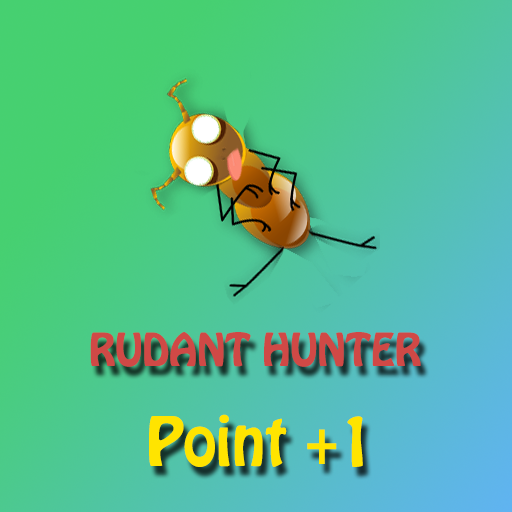
<style>
.page{position:relative;width:512px;height:512px}
.page>*{position:absolute;margin:0}
.t1{font:40px "HoboStd";color:#d04946}
.t2{font:60px "HoboStd";color:#ffe400}
</style>
<div class="page">
<p class="t1" style="left:90px;top:332px;width:331px;height:35px">RUDANT HUNTER</p>
<p class="t2" style="left:149px;top:414px;width:214px;height:53px">Point +1</p>
</div>
